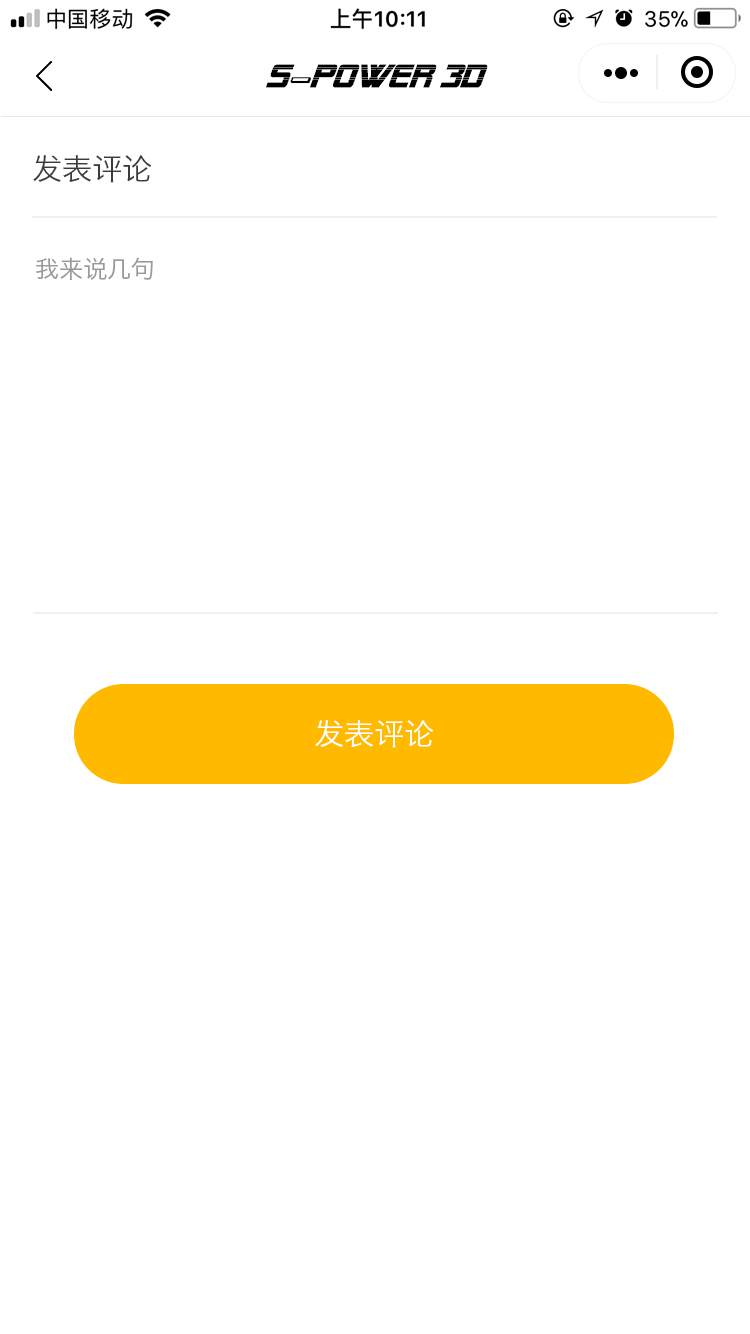
<style>
.page{position:relative;width:750px;height:1334px;background:#ffffff}
.page>*{position:absolute;margin:0}
.t1{font:32px "AlienEncountersItalic";color:#000000;text-transform:uppercase;font-weight:bold}
.t2{font:32px "911Porscha3DItalic";color:#000000;text-transform:uppercase;font-weight:bold}
.t3{font:30px "HiraginoSansGB-W3";color:#3b3b3b;text-transform:uppercase}
.t4{font:24px "HiraginoSansGB-W3";color:#999999;text-transform:uppercase}
.t5{font:30px "HiraginoSansGB-W3";color:#ffffff;text-transform:uppercase}
</style>
<div class="page">
<p class="t1" style="left:266px;top:64px;width:222px;height:24px">s<span class="t2">-</span>power 3D</p>
<p class="t3" style="left:33px;top:155px;width:119px;height:28px">发表评论</p>
<p class="t4" style="left:36px;top:257px;width:117px;height:23px">我来说几句</p>
<p class="t5" style="left:315px;top:720px;width:119px;height:28px">发表评论</p>
</div>
